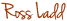
<style>
.page{position:relative;width:67px;height:21px;background:#ffffff}
.page>*{position:absolute;margin:0}
.t1{font:23px "JennaSue";color:#993300}
</style>
<div class="page">
<p class="t1" style="left:1px;top:1px;width:65px;height:19px">Ross Ladd</p>
</div>
